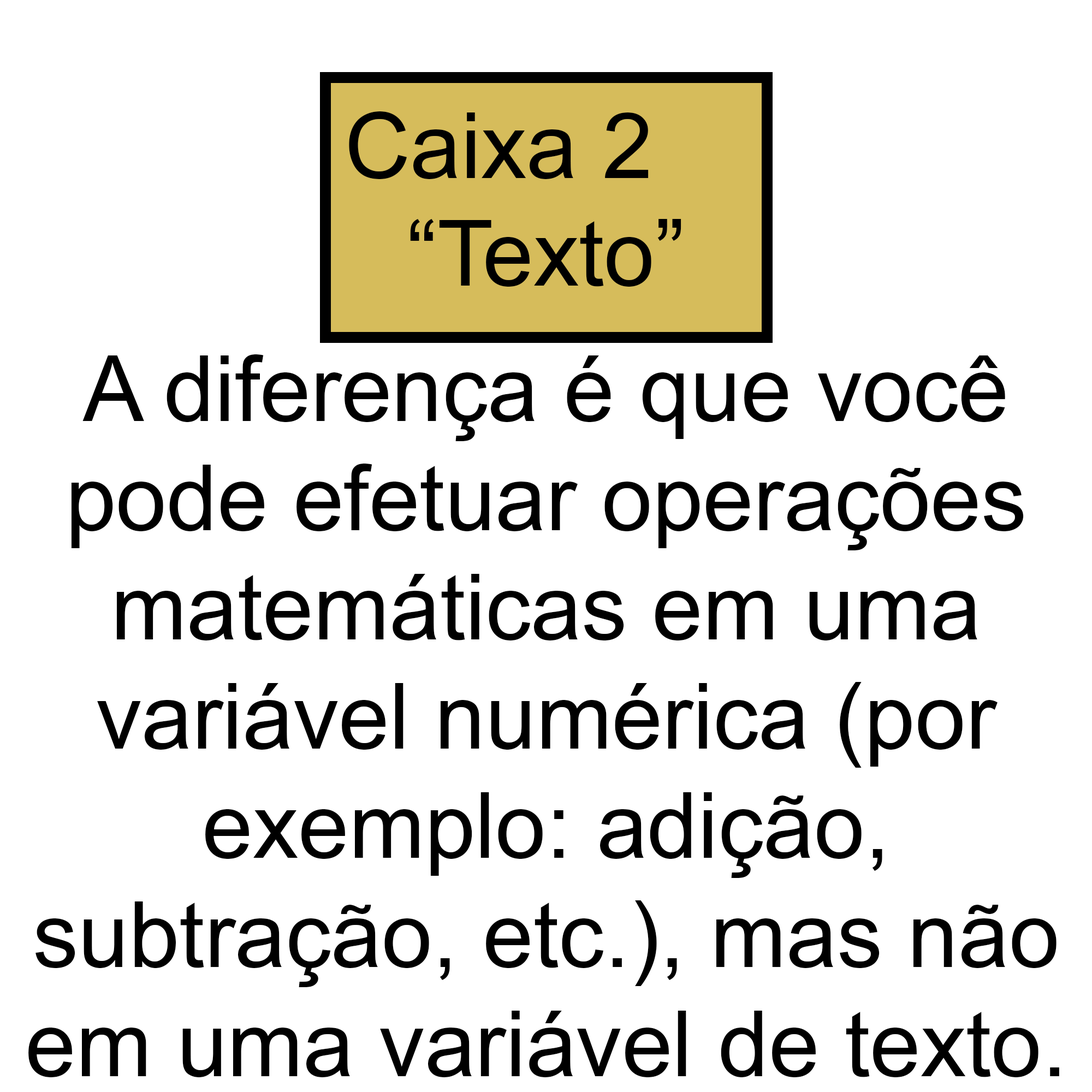
<style>
.page{position:relative;width:1092px;height:1092px;background:#ffffff}
.page>*{position:absolute;margin:0}
.t1{font:91px "ArialMT";color:#000000}
</style>
<div class="page">
<p class="t1" style="left:349px;top:111px;width:300px;height:68px">Caixa 2</p>
<p class="t1" style="left:410px;top:219px;width:271px;height:68px">“Texto”</p>
<p class="t1" style="left:28px;top:354px;width:1031px;height:723px;text-align:center">A diferença é que você<br>pode efetuar operações<br>matemáticas em uma<br>variável numérica (por<br>exemplo: adição,<br>subtração, etc.), mas não<br>em uma variável de texto.</p>
</div>
